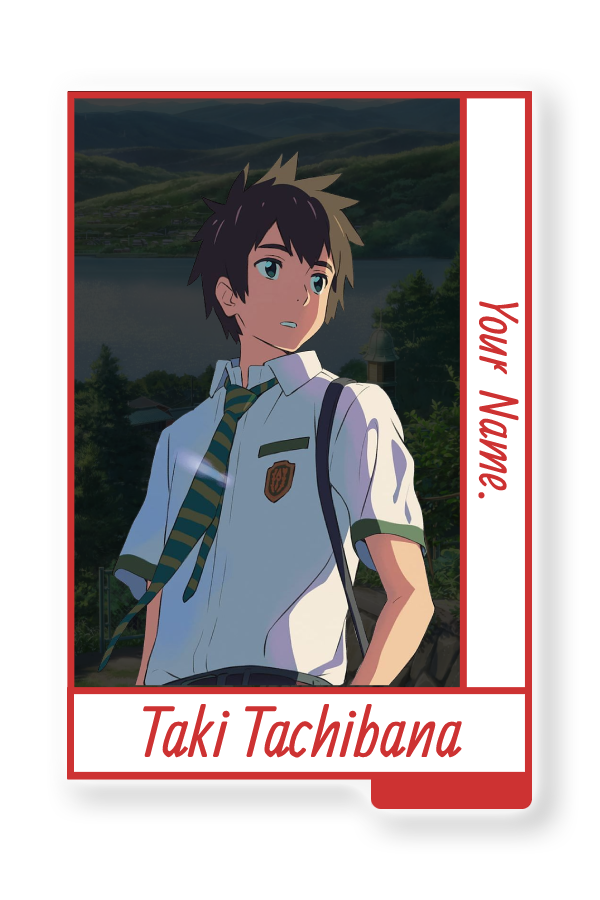
<style>
.page{position:relative;width:600px;height:900px;background:#ffffff}
.page>*{position:absolute;margin:0}
.t1{font:54px "Allan-Regular";color:#cd3232}
.t2{font:70px "Allan-Regular";color:#cd3232}
</style>
<div class="page">
<p class="t1" style="left:478px;top:301px;width:41px;height:198px;rotate:90deg">Your  Name.</p>
<p class="t2" style="left:142px;top:703px;width:321px;height:55px">Taki Tachibana</p>
</div>
